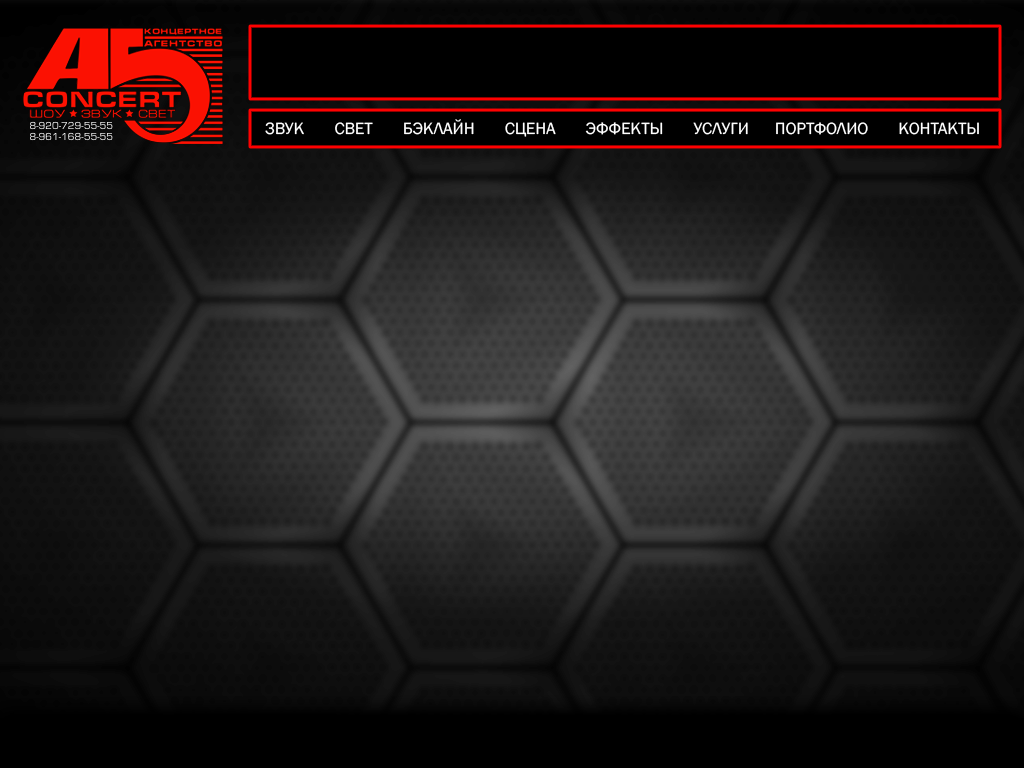
<style>
.page{position:relative;width:1024px;height:768px}
.page>*{position:absolute;margin:0}
.t1{font:11px "EurostileRegular"}
.t2{font:17px "FranklinGothic-Book";color:#ffffff}
</style>
<div class="page">
<p class="t1" style="left:30px;top:121px;width:83px;height:9px">8-920-729-55-55</p>
<p class="t2" style="left:265px;top:119px;width:714px;height:18px">ЗВУК       СВЕТ       БЭКЛАЙН       СЦЕНА       ЭФФЕКТЫ       УСЛУГИ      ПОРТФОЛИО       КОНТАКТЫ</p>
<p class="t1" style="left:30px;top:132px;width:83px;height:9px">8-961-168-55-55</p>
</div>
